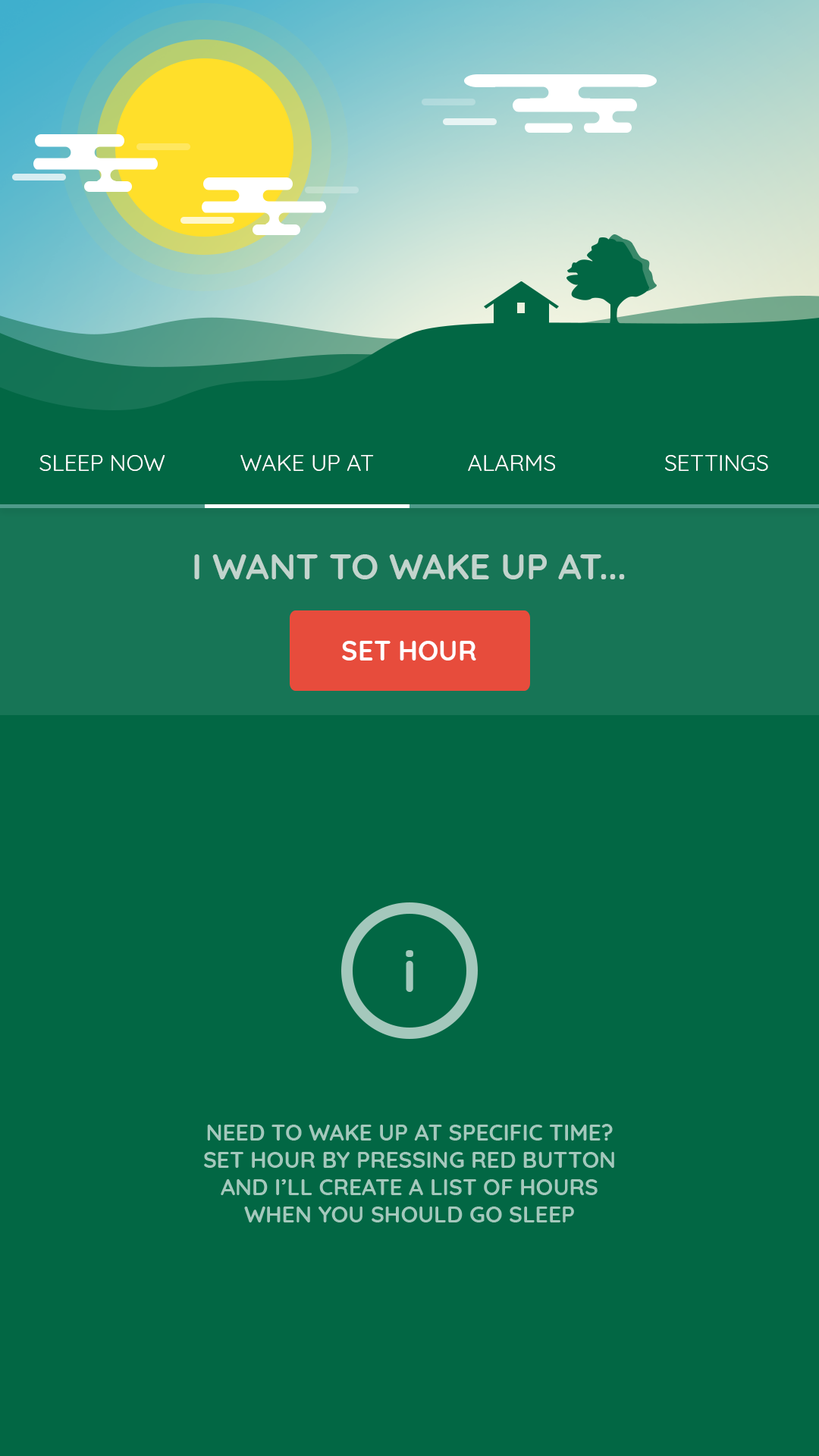
<style>
.page{position:relative;width:819px;height:1456px;background:#026744}
.page>*{position:absolute;margin:0}
.t1{font:22.7px "Quicksand-Regular";color:#ffffff}
.t2{font:36.4px "Quicksand-Bold";color:#c2d4cd;text-transform:uppercase}
.t3{font:27.3px "Quicksand-Bold";color:#ffffff;text-transform:uppercase}
.t4{font:58.5px "Quicksand-Bold";color:#a4c8bc}
.t5{font:22.7px "Quicksand-Bold";color:#a4c8bc}
</style>
<div class="page">
<p class="t1" style="left:39px;top:455px;width:126px;height:16px">SLEEP NOW</p>
<p class="t1" style="left:240px;top:455px;width:134px;height:16px">WAKE UP AT</p>
<p class="t1" style="left:468px;top:455px;width:87px;height:16px">ALARMS</p>
<p class="t1" style="left:665px;top:455px;width:103px;height:16px">SETTINGS</p>
<p class="t2" style="left:194px;top:554px;width:431px;height:25px">I WANT TO WAKE UP AT...</p>
<p class="t3" style="left:342px;top:641px;width:134px;height:19px">set hour</p>
<p class="t4" style="left:406px;top:950px;width:7px;height:42px">i</p>
<p class="t5" style="left:204px;top:1124px;width:410px;height:98px;text-align:center">NEED TO WAKE UP AT SPECIFIC TIME?<br>SET HOUR BY PRESSING RED BUTTON<br>AND I’LL CREATE A LIST OF HOURS<br>WHEN YOU SHOULD GO SLEEP</p>
</div>
